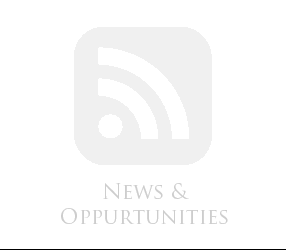
<style>
.page{position:relative;width:286px;height:250px;background:#ffffff}
.page>*{position:absolute;margin:0}
.t1{font:20.8px "TrajanPro-Regular";color:#cdcdcd}
</style>
<div class="page">
<p class="t1" style="left:61px;top:183px;width:167px;height:41px;text-align:center">News &amp;<br>Oppurtunities</p>
</div>
